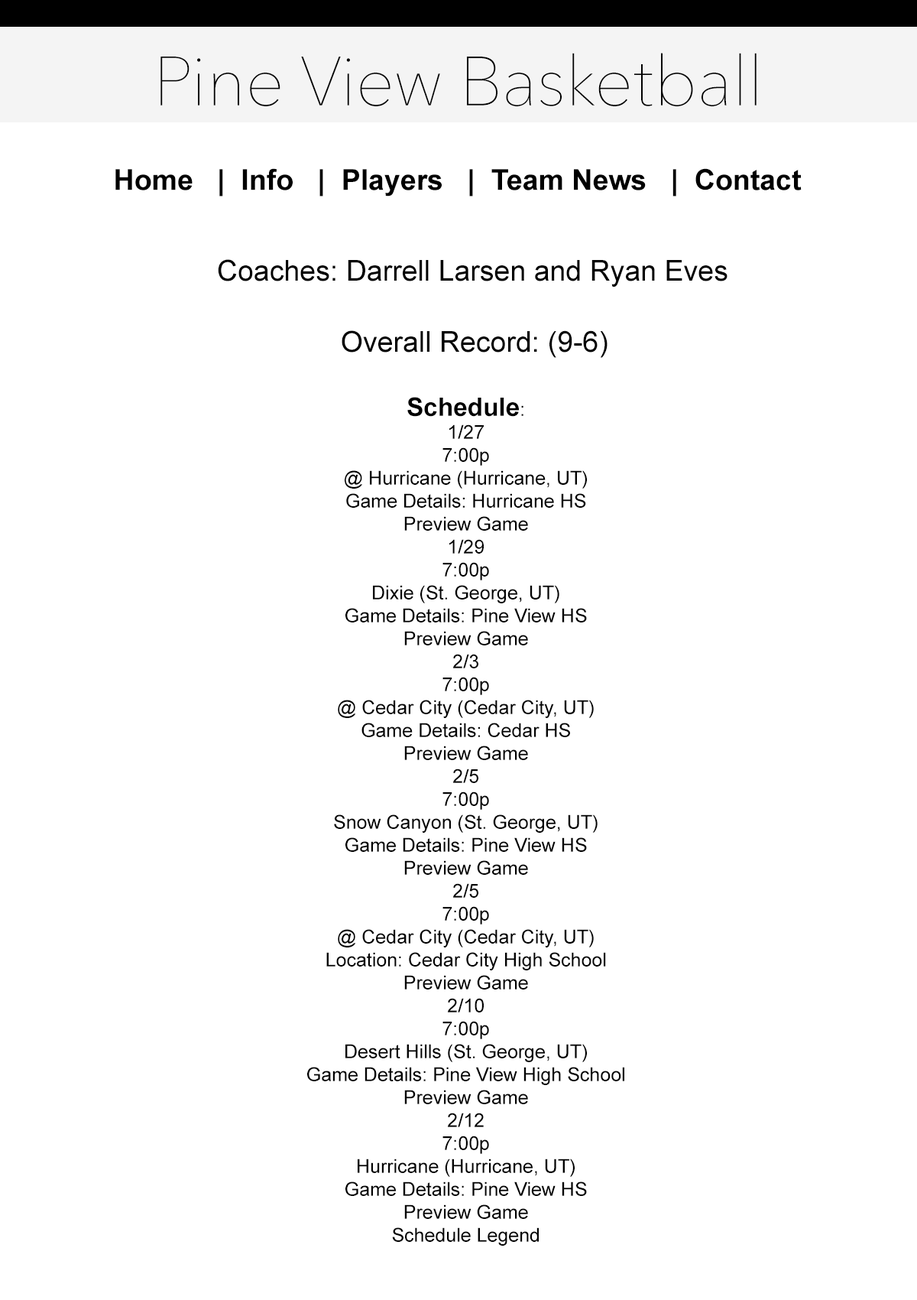
<style>
.page{position:relative;width:917px;height:1300px;background:#ffffff}
.page>*{position:absolute;margin:0}
.t1{font:68.8px "AvenirNext-UltraLight";color:#000000}
.t2{font:28.7px "Arial-BoldMT";color:#000000}
.t3{font:28.7px "ArialMT";color:#000000}
.t4{font:19.1px "ArialMT";color:#000000}
.t5{font:25.5px "Arial-BoldMT";color:#000000}
</style>
<div class="page">
<p class="t1" style="left:161px;top:53px;width:596px;height:53px">Pine View Basketball</p>
<p class="t2" style="left:115px;top:168px;width:687px;height:28px">Home   |  Info   |  Players   |  Team News   |  Contact</p>
<p class="t3" style="left:218px;top:259px;width:510px;height:28px">Coaches: Darrell Larsen and Ryan Eves</p>
<p class="t3" style="left:342px;top:330px;width:266px;height:28px">Overall Record: (9-6)</p>
<p class="t4" style="left:307px;top:397px;width:318px;height:848px;text-align:center"><span class="t5">Schedule</span>:<br>1/27<br>7:00p<br>@ Hurricane (Hurricane, UT)<br>Game Details: Hurricane HS<br>Preview Game<br>1/29<br>7:00p<br>Dixie (St. George, UT)<br>Game Details: Pine View HS<br>Preview Game<br>2/3<br>7:00p<br>@ Cedar City (Cedar City, UT)<br>Game Details: Cedar HS<br>Preview Game<br>2/5<br>7:00p<br>Snow Canyon (St. George, UT)<br>Game Details: Pine View HS<br>Preview Game<br>2/5<br>7:00p<br>@ Cedar City (Cedar City, UT)<br>Location: Cedar City High School<br>Preview Game<br>2/10<br>7:00p<br>Desert Hills (St. George, UT)<br>Game Details: Pine View High School<br>Preview Game<br>2/12<br>7:00p<br>Hurricane (Hurricane, UT)<br>Game Details: Pine View HS<br>Preview Game<br>Schedule Legend</p>
</div>
